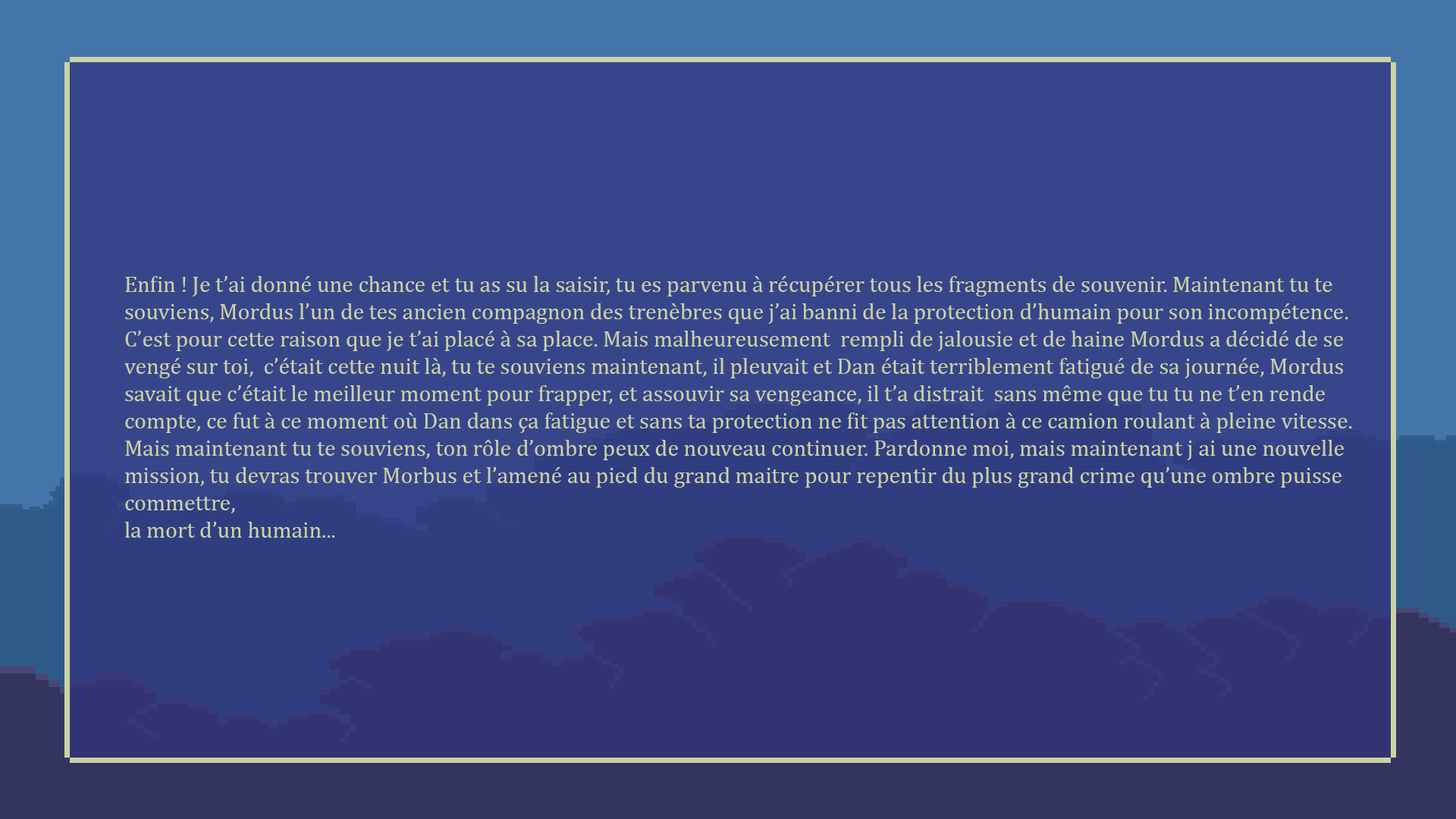
<style>
.page{position:relative;width:1456px;height:819px;background:#37468b}
.page>*{position:absolute;margin:0}
.t1{font:22.7px "CambriaMath";color:#cbd2a4}
</style>
<div class="page">
<p class="t1" style="left:124px;top:276px;width:1228px;height:262px">Enfin ! Je t’ai donné une chance et tu as su la saisir, tu es parvenu à récupérer tous les fragments de souvenir. Maintenant tu te souviens, Mordus l’un de tes ancien compagnon des trenèbres que j’ai banni de la protection d’humain pour son incompétence.<br>C’est pour cette raison que je t’ai placé à sa place. Mais malheureusement  rempli de jalousie et de haine Mordus a décidé de se vengé sur toi,  c’était cette nuit là, tu te souviens maintenant, il pleuvait et Dan était terriblement fatigué de sa journée, Mordus savait que c’était le meilleur moment pour frapper, et assouvir sa vengeance, il t’a distrait  sans même que tu tu ne t’en rende compte, ce fut à ce moment où Dan dans ça fatigue et sans ta protection ne fit pas attention à ce camion roulant à pleine vitesse. <br>Mais maintenant tu te souviens, ton rôle d’ombre peux de nouveau continuer. Pardonne moi, mais maintenant j ai une nouvelle mission, tu devras trouver Morbus et l’amené au pied du grand maitre pour repentir du plus grand crime qu’une ombre puisse commettre, <br>la mort d’un humain...</p>
</div>
